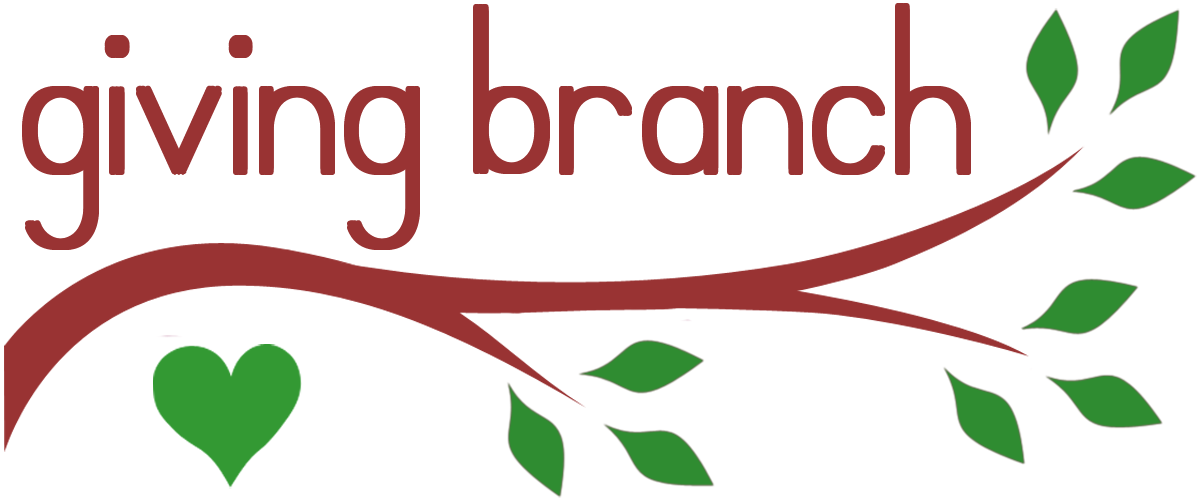
<style>
.page{position:relative;width:1200px;height:500px;background:#ffffff}
.page>*{position:absolute;margin:0}
.t1{font:326.9px "SimplePrint-Regular";color:#993333}
</style>
<div class="page">
<p class="t1" style="left:22px;top:3px;width:942px;height:243px">giving branch</p>
<p class="t1" style="left:25px;top:3px;width:942px;height:243px">giving branch</p>
<p class="t1" style="left:30px;top:3px;width:941px;height:243px">giving branch</p>
<p class="t1" style="left:22px;top:7px;width:942px;height:243px">giving branch</p>
<p class="t1" style="left:27px;top:7px;width:941px;height:243px">giving branch</p>
<p class="t1" style="left:30px;top:7px;width:941px;height:243px">giving branch</p>
</div>
